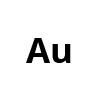
<style>
.page{position:relative;width:100px;height:100px;background:#ffffff}
.page>*{position:absolute;margin:0}
.t1{font:35px "OpenSans-Bold";color:#000000}
</style>
<div class="page">
<p class="t1" style="left:26px;top:38px;width:45px;height:25px">Au</p>
</div>
